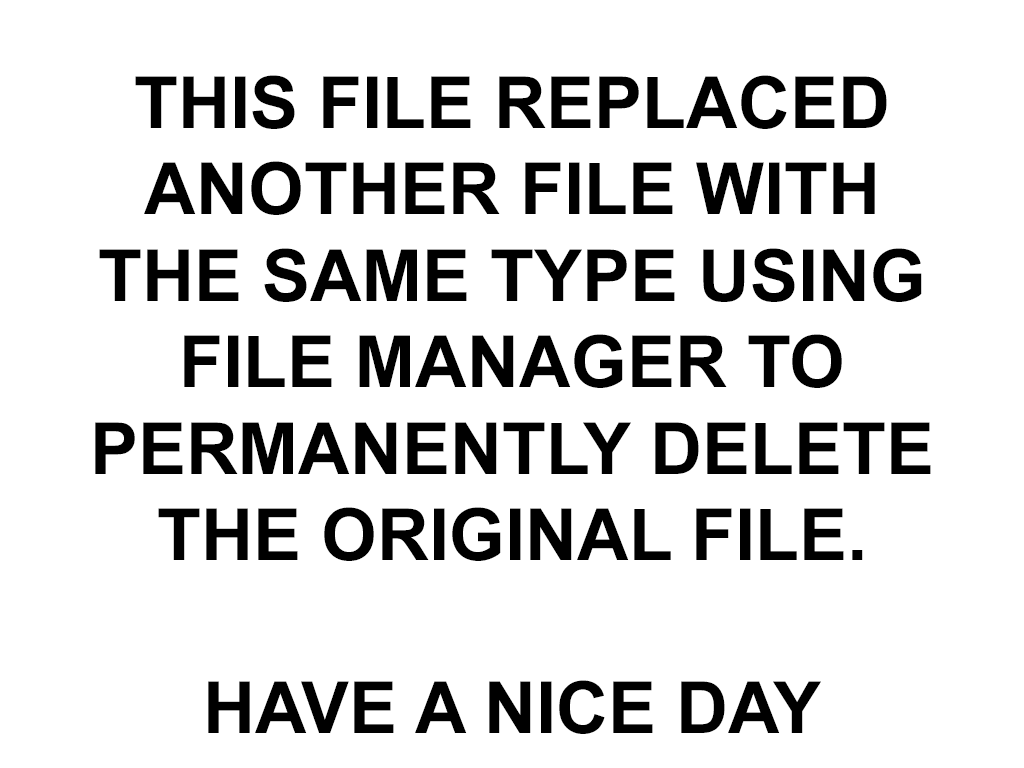
<style>
.page{position:relative;width:1024px;height:768px;background:#ffffff}
.page>*{position:absolute;margin:0}
.t1{font:72px "Arial-BoldMT";color:#000000}
</style>
<div class="page">
<p class="t1" style="left:95px;top:75px;width:836px;height:659px;text-align:center">THIS FILE REPLACED <br>ANOTHER FILE WITH <br>THE SAME TYPE USING <br>FILE MANAGER TO <br>PERMANENTLY DELETE <br>THE ORIGINAL FILE.<br><br>HAVE A NICE DAY</p>
</div>
